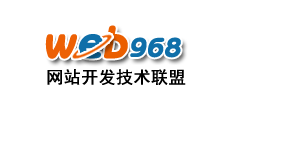
<style>
.page{position:relative;width:300px;height:150px;background:#ffffff}
.page>*{position:absolute;margin:0}
.t1{font:36px "IDLiBold";color:#0f6fa9;font-weight:bold;font-style:italic}
.t2{font:60px "IDLiBold";color:#ed6004;font-weight:bold;font-style:italic}
.t3{font:60px "IDLiBold";color:#0f6fa9;font-weight:bold;font-style:italic}
.t4{font:60px "IDLiBold";color:#eb5f00;font-weight:bold;font-style:italic}
.t5{font:17px "SimHei";color:#000000;font-weight:bold}
</style>
<div class="page">
<p class="t1" style="left:45px;top:25px;width:136px;height:34px"><span class="t2">w</span><span class="t3">e</span><span class="t4">b</span>968</p>
<p class="t5" style="left:47px;top:69px;width:139px;height:16px">网站开发技术联盟</p>
</div>
